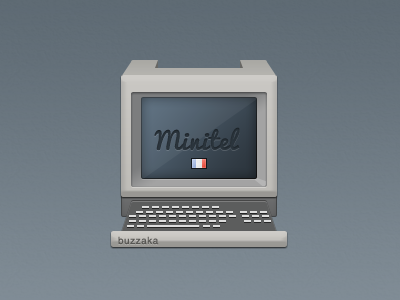
<style>
.page{position:relative;width:400px;height:300px}
.page>*{position:absolute;margin:0}
.t1{font:24px "Pacifico";letter-spacing:0.05em;color:#303840}
.t2{font:10px "Helvetica";letter-spacing:0.05em;color:#646258}
</style>
<div class="page">
<p class="t1" style="left:154px;top:127px;width:86px;height:24px">Minitel</p>
<p class="t2" style="left:118px;top:236px;width:41px;height:9px">buzzaka</p>
</div>
